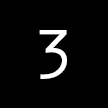
<style>
.page{position:relative;width:108px;height:108px;background:#000000}
.page>*{position:absolute;margin:0}
.t1{font:72px "OratorStd";color:#ffffff}
</style>
<div class="page">
<p class="t1" style="left:39px;top:30px;width:28px;height:49px">3</p>
</div>
